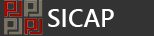
<style>
.page{position:relative;width:154px;height:36px;background:#333333}
.page>*{position:absolute;margin:0}
.t1{font:25px "SegoeUI-Semibold";color:#ffffff}
</style>
<div class="page">
<p class="t1" style="left:48px;top:9px;width:66px;height:18px">SICAP</p>
</div>
